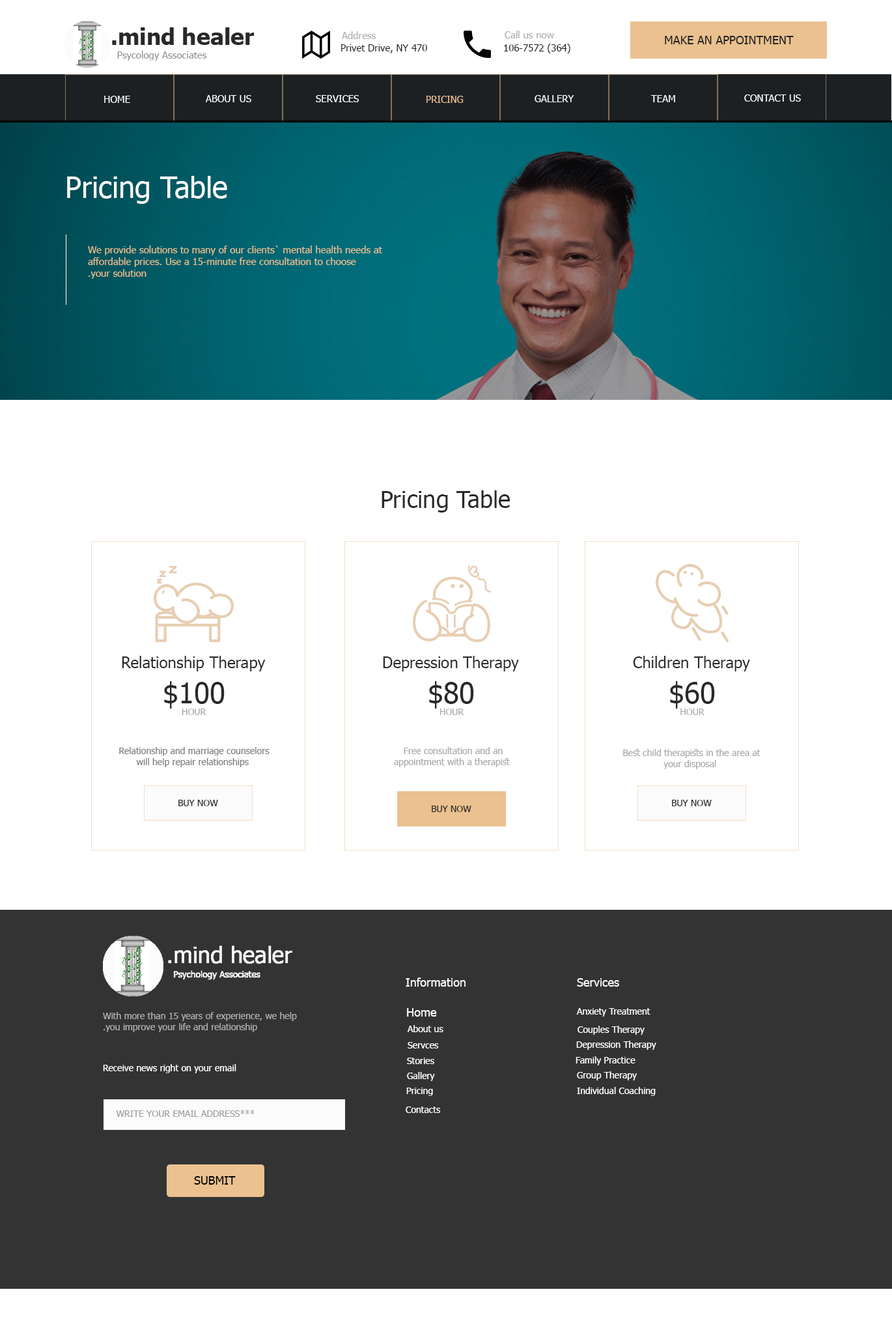
<style>
.page{position:relative;width:892px;height:1337px;background:#ffffff}
.page>*{position:absolute;margin:0}
.t1{font:9.8px "Tahoma";color:#aaaaaa}
.t2{font:11.7px "Tahoma";color:#1d2023}
.t3{font:9.8px "Tahoma";color:#1d2023}
.t4{font:9.8px "Tahoma";color:#ffffff}
.t5{font:9.8px "Tahoma";color:#eac18f}
.t6{font:29.3px "Tahoma";color:#ffffff}
.t7{font:23.4px "Tahoma";color:#292929}
.t8{font:15.6px "Tahoma";color:#292929}
.t9{font:28.6px "Tahoma";color:#292929}
.t10{font:9.1px "Tahoma";color:#aaaaaa}
.t11{font:9.1px "Tahoma";color:#808080}
.t12{font:9.1px "Tahoma";color:#292929}
.t13{font:11.7px "Tahoma";color:#ffffff}
.t14{font:9.1px "Tahoma";color:#adadad}
.t15{font:9.1px "Tahoma";color:#ffffff}
.t16{font:9.1px "Tahoma";color:#fefefe}
.t17{font:9.1px "Tahoma";color:#a0a0a0}
.t18{font:11.7px "Tahoma";color:#000000}
</style>
<div class="page">
<p class="t1" style="left:342px;top:31px;width:34px;height:8px">Address</p>
<p class="t1" style="left:505px;top:31px;width:49px;height:7px">Call us now</p>
<p class="t2" style="left:665px;top:36px;width:129px;height:8px">MAKE AN APPOINTMENT</p>
<p class="t3" style="left:341px;top:44px;width:86px;height:9px">470 Privet Drive, NY</p>
<p class="t3" style="left:504px;top:44px;width:66px;height:9px">(364) 106-7572</p>
<p class="t4" style="left:104px;top:96px;width:26px;height:7px">HOME</p>
<p class="t4" style="left:206px;top:95px;width:45px;height:7px">ABOUT US</p>
<p class="t4" style="left:316px;top:95px;width:43px;height:7px">SERVICES</p>
<p class="t5" style="left:426px;top:96px;width:38px;height:7px">PRICING</p>
<p class="t4" style="left:535px;top:95px;width:39px;height:7px">GALLERY</p>
<p class="t4" style="left:650px;top:95px;width:25px;height:7px">TEAM</p>
<p class="t4" style="left:744px;top:94px;width:57px;height:8px">CONTACT US</p>
<p class="t6" style="left:67px;top:176px;width:160px;height:28px">Pricing Table</p>
<p class="t5" style="left:88px;top:245px;width:294px;height:34px;text-align:right">We provide solutions to many of our clients` mental health needs at<br> affordable prices. Use a 15-minute free consultation to choose<br> your solution.</p>
<p class="t7" style="left:382px;top:490px;width:128px;height:22px">Pricing Table</p>
<p class="t8" style="left:122px;top:656px;width:144px;height:15px">Relationship Therapy</p>
<p class="t8" style="left:383px;top:656px;width:136px;height:15px">Depression Therapy</p>
<p class="t8" style="left:633px;top:656px;width:117px;height:15px">Children Therapy</p>
<p class="t9" style="left:164px;top:681px;width:61px;height:27px">$100</p>
<p class="t9" style="left:429px;top:681px;width:45px;height:27px">$80</p>
<p class="t9" style="left:670px;top:681px;width:45px;height:27px">$60</p>
<p class="t10" style="left:182px;top:708px;width:24px;height:7px">HOUR</p>
<p class="t10" style="left:440px;top:708px;width:24px;height:7px">HOUR</p>
<p class="t10" style="left:680px;top:708px;width:25px;height:7px">HOUR</p>
<p class="t11" style="left:119px;top:747px;width:151px;height:20px;text-align:center">Relationship and marriage counselors<br> will help repair relationships</p>
<p class="t10" style="left:394px;top:747px;width:116px;height:20px;text-align:center">Free consultation and an<br> appointment with a therapist</p>
<p class="t10" style="left:623px;top:749px;width:138px;height:20px;text-align:center">Best child therapists in the area at<br> your disposal</p>
<p class="t12" style="left:178px;top:800px;width:40px;height:6px">BUY NOW</p>
<p class="t12" style="left:432px;top:805px;width:39px;height:7px">BUY NOW</p>
<p class="t12" style="left:672px;top:800px;width:40px;height:6px">BUY NOW</p>
<p class="t13" style="left:406px;top:977px;width:60px;height:9px">Information</p>
<p class="t13" style="left:577px;top:978px;width:42px;height:8px">Services</p>
<p class="t14" style="left:103px;top:1012px;width:194px;height:20px;text-align:right">With more than 15 years of experience, we help<br> you improve your life and relationship.</p>
<p class="t13" style="left:407px;top:1008px;width:30px;height:8px">Home</p>
<p class="t15" style="left:576px;top:1008px;width:74px;height:8px">Anxiety Treatment</p>
<p class="t15" style="left:407px;top:1025px;width:36px;height:7px">About us</p>
<p class="t15" style="left:578px;top:1026px;width:67px;height:9px">Couples Therapy</p>
<p class="t15" style="left:408px;top:1042px;width:31px;height:6px">Servces</p>
<p class="t15" style="left:576px;top:1040px;width:80px;height:10px">Depression Therapy</p>
<p class="t15" style="left:407px;top:1057px;width:27px;height:7px">Stories</p>
<p class="t15" style="left:576px;top:1056px;width:59px;height:9px">Family Practice</p>
<p class="t16" style="left:103px;top:1064px;width:133px;height:9px">Receive news right on your email</p>
<p class="t15" style="left:407px;top:1072px;width:28px;height:9px">Gallery</p>
<p class="t15" style="left:577px;top:1071px;width:60px;height:9px">Group Therapy</p>
<p class="t15" style="left:406px;top:1087px;width:27px;height:9px">Pricing</p>
<p class="t15" style="left:577px;top:1087px;width:79px;height:9px">Individual Coaching</p>
<p class="t17" style="left:116px;top:1110px;width:139px;height:7px">***WRITE YOUR EMAIL ADDRESS</p>
<p class="t15" style="left:406px;top:1106px;width:35px;height:7px">Contacts</p>
<p class="t18" style="left:194px;top:1176px;width:42px;height:8px">SUBMIT</p>
</div>
